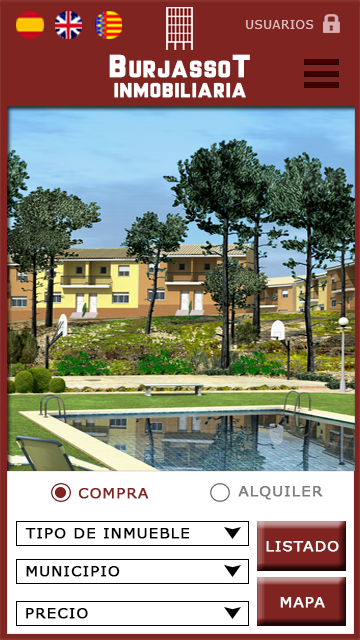
<style>
.page{position:relative;width:360px;height:640px}
.page>*{position:absolute;margin:0}
.t1{font:11.6px "MSReferenceSansSerif";letter-spacing:0.07em;color:#e0c0c0}
.t2{font:21.7px "MrHeadlines";letter-spacing:0.07em;color:#ffffff;scale:1.11 1}
.t3{font:29.6px "MrHeadlines";letter-spacing:0.07em;color:#ffffff;scale:1.11 1}
.t4{font:18.8px "MrHeadlines";letter-spacing:0.07em;color:#ffffff;scale:1.11 1}
.t5{font:14px "MSReferenceSansSerif";letter-spacing:0.07em;color:#7d7d7d;font-weight:bold;scale:1.04 1}
.t6{font:14px "MSReferenceSansSerif";letter-spacing:0.07em;color:#7f2421;font-weight:bold;scale:1.04 1}
.t7{font:14px "MSReferenceSansSerif";letter-spacing:0.07em;color:#000000;font-weight:bold;scale:1.04 1}
.t8{font:14px "MSReferenceSansSerif";letter-spacing:0.07em;color:#ffffff;font-weight:bold;scale:1.04 1}
</style>
<div class="page">
<p class="t1" style="left:246px;top:20px;width:68px;height:9px">USUARIOS</p>
<p class="t2" style="left:109px;top:54px;width:141px;height:24px"><span class="t3">B</span>URJASSO<span class="t3">T</span></p>
<p class="t4" style="left:114px;top:82px;width:132px;height:16px">INMOBILIARIA</p>
<p class="t5" style="left:238px;top:486px;width:85px;height:14px">ALQUILER</p>
<p class="t6" style="left:78px;top:488px;width:71px;height:11px">COMPRA</p>
<p class="t7" style="left:25px;top:528px;width:165px;height:11px">TIPO DE INMUEBLE</p>
<p class="t8" style="left:266px;top:541px;width:73px;height:11px">LISTADO</p>
<p class="t7" style="left:26px;top:566px;width:94px;height:11px">MUNICIPIO</p>
<p class="t8" style="left:280px;top:597px;width:45px;height:11px">MAPA</p>
<p class="t7" style="left:26px;top:608px;width:62px;height:11px">PRECIO</p>
</div>
